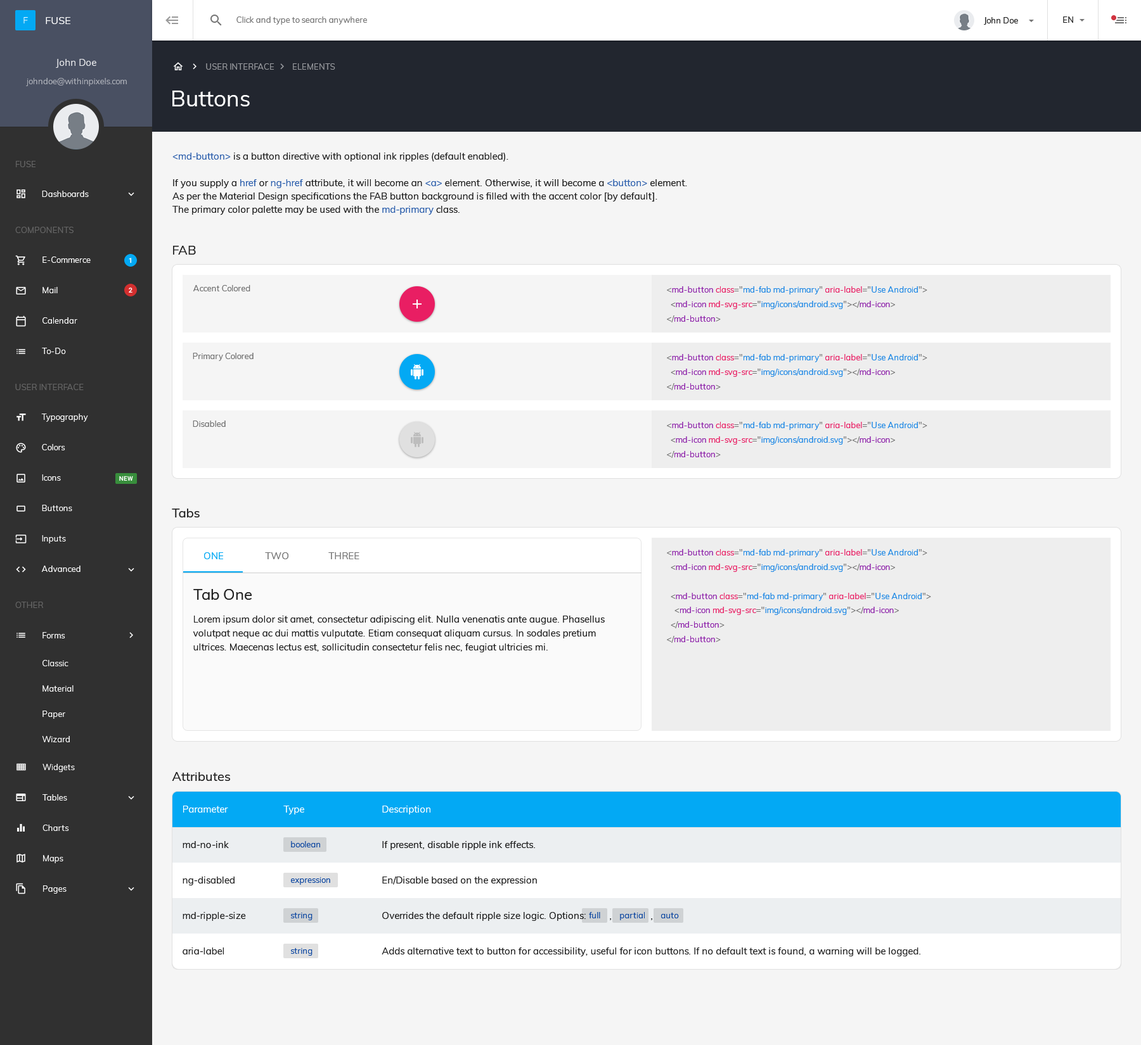
<style>
.page{position:relative;width:1141px;height:1045px;background:#f5f5f5}
.page>*{position:absolute;margin:0}
.t1{font:8.2px "Muli-Regular";color:#9a9ba0}
.t2{font:22.2px "Muli-Regular";color:#ffffff}
.t3{font:9.5px/13.3px "Muli-Regular";color:#202020}
.t4{font:12.7px "Muli-Regular";color:#202020}
.t5{font:8.2px "Muli-Regular";color:#707070}
.t6{font:8.2px "Muli-Regular";color:#1e88e5}
.t7{font:8.2px "Muli-Regular";color:#757575}
.t8{font:8.2px "Muli-Regular";color:#8e24aa}
.t9{font:8.2px "Muli-Regular";color:#e91e63}
.t10{font:9.5px "Muli-Regular";color:#03a9f4}
.t11{font:9.5px "Muli-Regular";color:#757575}
.t12{font:15.2px "Muli-Regular";color:#202020}
.t13{font:9.5px/13.9px "Muli-Regular";color:#202020}
.t14{font:9.5px "Muli-Regular";color:#ffffff}
.t15{font:9.5px "Muli-Regular";color:#1f1f1f}
.t16{font:8.2px "Muli-Regular";color:#0d47a1}
.t17{font:9.5px "Muli-Regular";color:#212121}
.t18{font:9.5px "Muli-Regular"}
</style>
<div class="page">
<p class="t1" style="left:206px;top:63px;width:68px;height:7px">USER INTERFACE</p>
<p class="t1" style="left:293px;top:63px;width:42px;height:7px">ELEMENTS</p>
<p class="t2" style="left:172px;top:91px;width:78px;height:15px">Buttons</p>
<p class="t3" style="left:172px;top:153px;width:515px;height:62px">&lt;md-button&gt; is a button directive with optional ink ripples (default enabled).<br><br>If you supply a href or ng-href attribute, it will become an &lt;a&gt; element. Otherwise, it will become a &lt;button&gt; element.<br>As per the Material Design specifications the FAB button background is filled with the accent color [by default].<br>The primary color palette may be used with the md-primary class.</p>
<p class="t4" style="left:173px;top:246px;width:23px;height:9px">FAB</p>
<p class="t5" style="left:193px;top:285px;width:57px;height:6px">Accent Colored</p>
<p class="t6" style="left:667px;top:286px;width:260px;height:37px"><span class="t7">&lt;</span><span class="t8">md-button </span><span class="t9">class</span><span class="t7">="</span>md-fab md-primary<span class="t7">" </span><span class="t9">aria-label</span><span class="t7">="</span>Use Android<span class="t7">"&gt;<br>  &lt;</span><span class="t8">md-icon </span><span class="t9">md-svg-src</span><span class="t7">="</span>img/icons/android.svg<span class="t7">"&gt;&lt;/</span><span class="t8">md-icon</span><span class="t7">&gt;<br>&lt;/</span><span class="t8">md-button</span><span class="t7">&gt;</span></p>
<p class="t5" style="left:193px;top:353px;width:60px;height:8px">Primary Colored</p>
<p class="t6" style="left:667px;top:354px;width:260px;height:36px"><span class="t7">&lt;</span><span class="t8">md-button </span><span class="t9">class</span><span class="t7">="</span>md-fab md-primary<span class="t7">" </span><span class="t9">aria-label</span><span class="t7">="</span>Use Android<span class="t7">"&gt;<br>  &lt;</span><span class="t8">md-icon </span><span class="t9">md-svg-src</span><span class="t7">="</span>img/icons/android.svg<span class="t7">"&gt;&lt;/</span><span class="t8">md-icon</span><span class="t7">&gt;<br>&lt;/</span><span class="t8">md-button</span><span class="t7">&gt;</span></p>
<p class="t5" style="left:193px;top:421px;width:33px;height:6px">Disabled</p>
<p class="t6" style="left:667px;top:422px;width:260px;height:36px"><span class="t7">&lt;</span><span class="t8">md-button </span><span class="t9">class</span><span class="t7">="</span>md-fab md-primary<span class="t7">" </span><span class="t9">aria-label</span><span class="t7">="</span>Use Android<span class="t7">"&gt;<br>  &lt;</span><span class="t8">md-icon </span><span class="t9">md-svg-src</span><span class="t7">="</span>img/icons/android.svg<span class="t7">"&gt;&lt;/</span><span class="t8">md-icon</span><span class="t7">&gt;<br>&lt;/</span><span class="t8">md-button</span><span class="t7">&gt;</span></p>
<p class="t4" style="left:172px;top:509px;width:28px;height:9px">Tabs</p>
<p class="t10" style="left:204px;top:553px;width:19px;height:6px">ONE</p>
<p class="t11" style="left:265px;top:553px;width:23px;height:6px">TWO</p>
<p class="t11" style="left:328px;top:553px;width:31px;height:6px">THREE</p>
<p class="t6" style="left:667px;top:549px;width:264px;height:94px"><span class="t7">&lt;</span><span class="t8">md-button </span><span class="t9">class</span><span class="t7">="</span>md-fab md-primary<span class="t7">" </span><span class="t9">aria-label</span><span class="t7">="</span>Use Android<span class="t7">"&gt;<br>  &lt;</span><span class="t8">md-icon </span><span class="t9">md-svg-src</span><span class="t7">="</span>img/icons/android.svg<span class="t7">"&gt;&lt;/</span><span class="t8">md-icon</span><span class="t7">&gt;<br><br>  &lt;</span><span class="t8">md-button </span><span class="t9">class</span><span class="t7">="</span>md-fab md-primary<span class="t7">" </span><span class="t9">aria-label</span><span class="t7">="</span>Use Android<span class="t7">"&gt;<br>    &lt;</span><span class="t8">md-icon </span><span class="t9">md-svg-src</span><span class="t7">="</span>img/icons/android.svg<span class="t7">"&gt;&lt;/</span><span class="t8">md-icon</span><span class="t7">&gt;<br>  &lt;/</span><span class="t8">md-button</span><span class="t7">&gt;<br>&lt;/</span><span class="t8">md-button</span><span class="t7">&gt;</span></p>
<p class="t12" style="left:193px;top:589px;width:59px;height:11px">Tab One</p>
<p class="t13" style="left:193px;top:616px;width:411px;height:37px">Lorem ipsum dolor sit amet, consectetur adipiscing elit. Nulla venenatis ante augue. Phasellus<br>volutpat neque ac dui mattis vulputate. Etiam consequat aliquam cursus. In sodales pretium<br>ultrices. Maecenas lectus est, sollicitudin consectetur felis nec, feugiat ultricies mi.</p>
<p class="t4" style="left:172px;top:772px;width:58px;height:9px">Attributes</p>
<p class="t14" style="left:183px;top:806px;width:45px;height:7px">Parameter</p>
<p class="t14" style="left:283px;top:806px;width:21px;height:9px">Type</p>
<p class="t14" style="left:382px;top:806px;width:48px;height:9px">Description</p>
<p class="t15" style="left:182px;top:841px;width:47px;height:7px">md-no-ink</p>
<p class="t16" style="left:291px;top:841px;width:29px;height:7px">boolean</p>
<p class="t15" style="left:382px;top:841px;width:153px;height:9px">If present, disable ripple ink effects.</p>
<p class="t17" style="left:182px;top:877px;width:52px;height:9px">ng-disabled</p>
<p class="t16" style="left:291px;top:878px;width:39px;height:7px">expression</p>
<p class="t17" style="left:382px;top:877px;width:155px;height:9px">En/Disable based on the expression</p>
<p class="t15" style="left:182px;top:912px;width:64px;height:9px">md-ripple-size</p>
<p class="t16" style="left:291px;top:912px;width:21px;height:9px">string</p>
<p class="t15" style="left:382px;top:912px;width:203px;height:9px">Overrides the default ripple size logic. Options:</p>
<p class="t16" style="left:589px;top:912px;width:11px;height:7px">full</p>
<p class="t16" style="left:620px;top:912px;width:24px;height:9px">partial</p>
<p class="t16" style="left:661px;top:912px;width:18px;height:7px">auto</p>
<p class="t18" style="left:610px;top:919px;width:1px;height:2px">,</p>
<p class="t18" style="left:651px;top:919px;width:1px;height:2px">,</p>
<p class="t17" style="left:182px;top:948px;width:42px;height:7px">aria-label</p>
<p class="t16" style="left:291px;top:948px;width:21px;height:8px">string</p>
<p class="t17" style="left:381px;top:948px;width:539px;height:9px">Adds alternative text to button for accessibility, useful for icon buttons. If no default text is found, a warning will be logged.</p>
</div>
